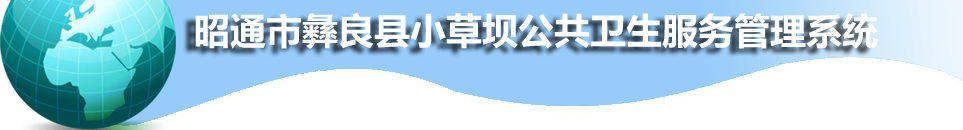
<style>
.page{position:relative;width:963px;height:130px;background:#ffffff}
.page>*{position:absolute;margin:0}
.t1{font:36px "MicrosoftYaHei-Bold";color:#ffffff}
</style>
<div class="page">
<p class="t1" style="left:195px;top:13px;width:683px;height:36px">昭通市彝良县小草坝公共卫生服务管理系统</p>
</div>
